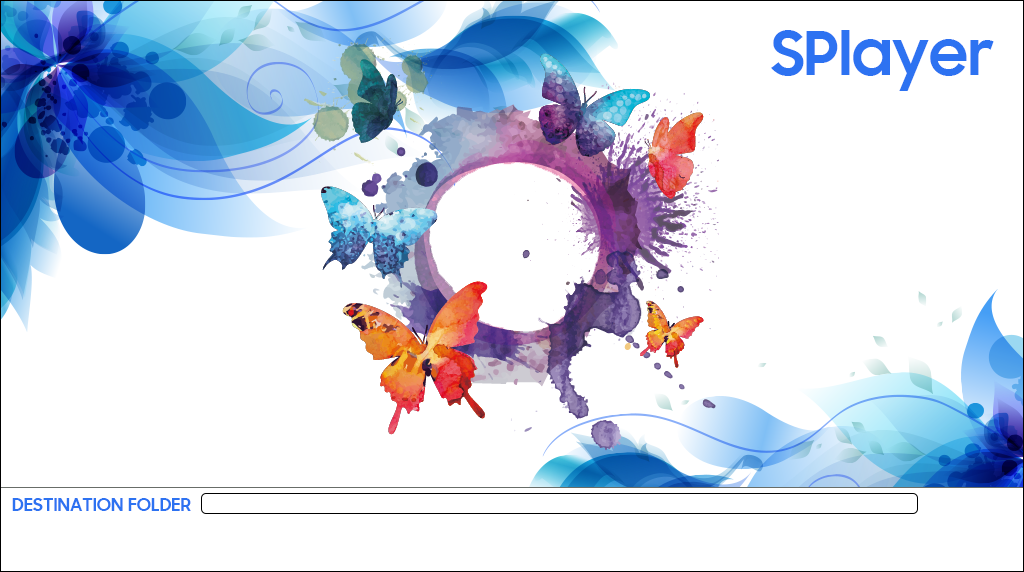
<style>
.page{position:relative;width:1024px;height:572px;background:#ffffff}
.page>*{position:absolute;margin:0}
.t1{font:60px "SamsungSharpSans-Bold";color:#2d72f1}
.t2{font:18px "SamsungSharpSans-Bold";color:#2d72f1}
</style>
<div class="page">
<p class="t1" style="left:771px;top:30px;width:223px;height:61px">SPlayer</p>
<p class="t2" style="left:12px;top:498px;width:179px;height:13px">DESTINATION FOLDER</p>
</div>
